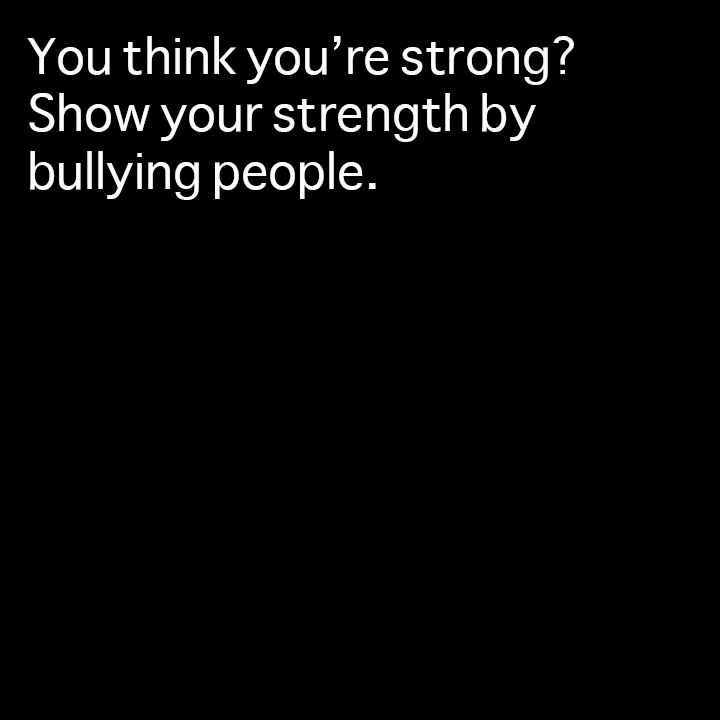
<style>
.page{position:relative;width:720px;height:720px;background:#000000}
.page>*{position:absolute;margin:0}
.t1{font:48px "Sathu";color:#fcfcfc}
</style>
<div class="page">
<p class="t1" style="left:27px;top:36px;width:547px;height:164px">You think you’re strong?<br>Show your strength by <br>bullying people.</p>
</div>
